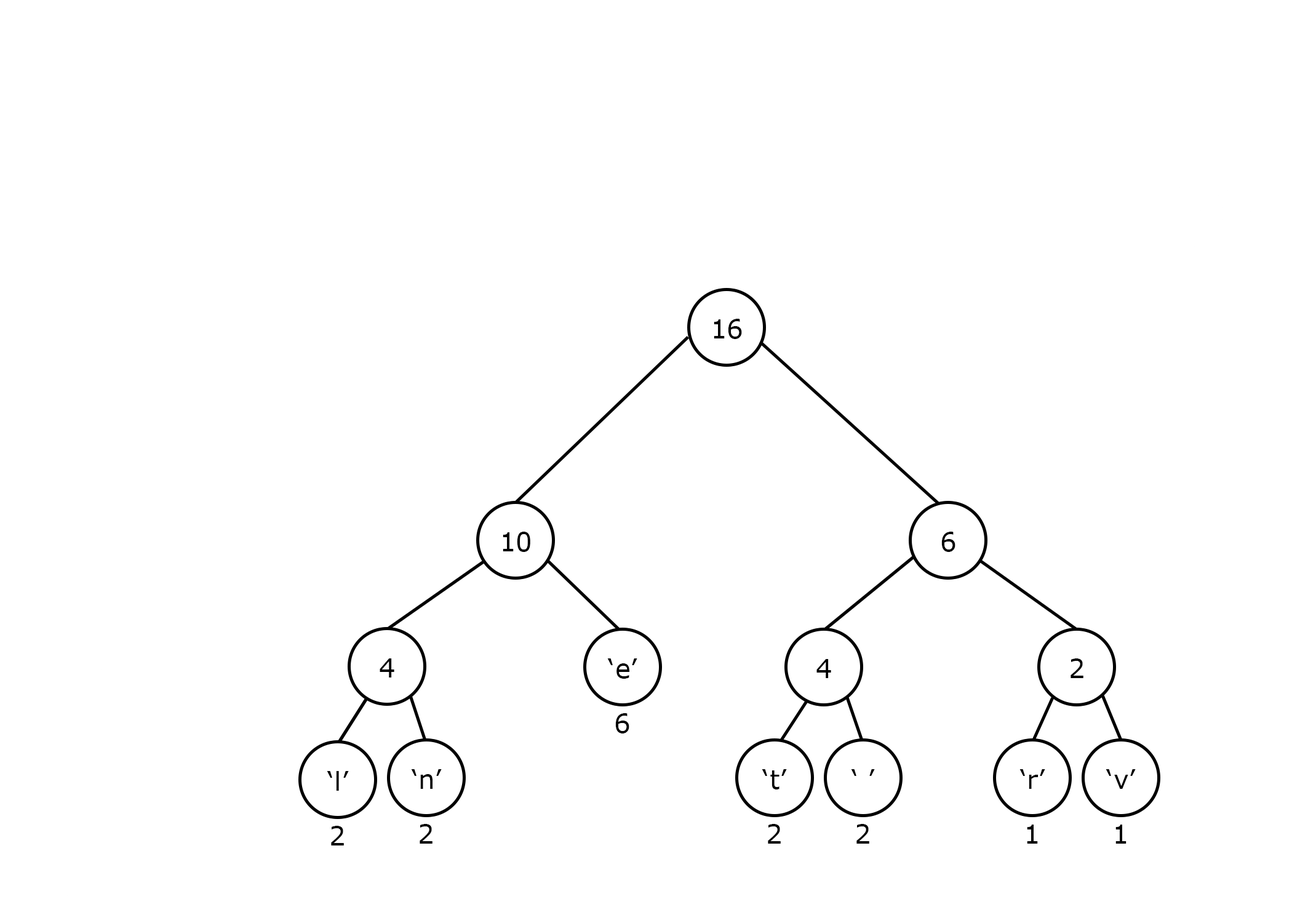
<style>
.page{position:relative;width:1292px;height:923px;background:#ffffff}
.page>*{position:absolute;margin:0}
.t1{font:25.6px "Verdana";color:#000000}
</style>
<div class="page">
<p class="t1" style="left:714px;top:319px;width:28px;height:20px">16</p>
<p class="t1" style="left:503px;top:532px;width:27px;height:20px">10</p>
<p class="t1" style="left:941px;top:532px;width:15px;height:20px">6</p>
<p class="t1" style="left:380px;top:658px;width:14px;height:19px">4</p>
<p class="t1" style="left:607px;top:658px;width:30px;height:21px">‘e’</p>
<p class="t1" style="left:816px;top:659px;width:15px;height:19px">4</p>
<p class="t1" style="left:1071px;top:658px;width:12px;height:20px">2</p>
<p class="t1" style="left:615px;top:713px;width:14px;height:20px">6</p>
<p class="t1" style="left:327px;top:771px;width:22px;height:20px">‘l’</p>
<p class="t1" style="left:411px;top:769px;width:31px;height:20px">‘n’</p>
<p class="t1" style="left:762px;top:769px;width:25px;height:20px">‘t’</p>
<p class="t1" style="left:851px;top:769px;width:24px;height:7px">‘ ’</p>
<p class="t1" style="left:1019px;top:769px;width:26px;height:20px">‘r’</p>
<p class="t1" style="left:1106px;top:769px;width:30px;height:20px">‘v’</p>
<p class="t1" style="left:331px;top:826px;width:13px;height:19px">2</p>
<p class="t1" style="left:420px;top:824px;width:13px;height:20px">2</p>
<p class="t1" style="left:768px;top:824px;width:13px;height:20px">2</p>
<p class="t1" style="left:856px;top:824px;width:13px;height:20px">2</p>
<p class="t1" style="left:1027px;top:824px;width:11px;height:20px">1</p>
<p class="t1" style="left:1115px;top:824px;width:12px;height:20px">1</p>
</div>
